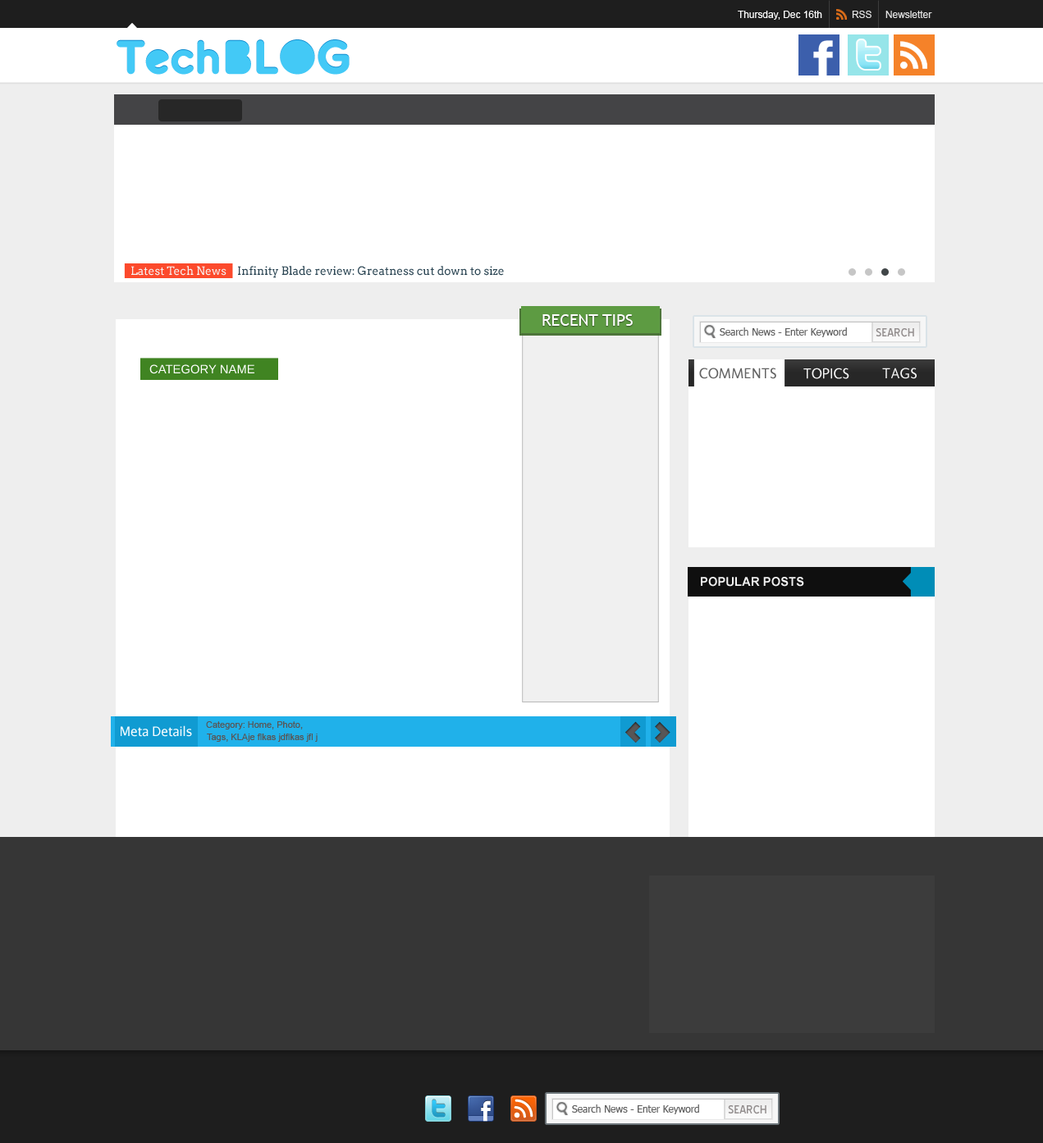
<style>
.page{position:relative;width:1043px;height:1143px;background:#ffffff}
.page>*{position:absolute;margin:0}
.t1{font:9.8px "ArialMT";color:#ffffff}
.t2{font:9.8px "ArialMT";color:#e4e4e4}
.t3{font:50.9px "Zitti";color:#43c9f6}
.t4{font:11.5px "Arvo";color:#ffffff}
.t5{font:11.5px "Arvo";color:#2c4654}
.t6{font:16.4px "TrebuchetMS";color:#ffffff}
.t7{font:9.8px "Tahoma";color:#606060}
.t8{font:14.8px "BlueHighway";color:#938e8e}
.t9{font:12.3px "Arimo";color:#ffffff}
.t10{font:14.8px "Molengo";color:#636363}
.t11{font:14.8px "Molengo";color:#f6f6f6}
.t12{font:12.3px "Arial-BoldMT";color:#f2f2f2}
.t13{font:13.1px "AurulentSans-Regular";color:#f6fcff}
.t14{font:9px "ArialMT";color:#585656}
.t15{font:34.5px "BNMachine";color:#585656}
</style>
<div class="page">
<p class="t1" style="left:738px;top:11px;width:84px;height:9px">Thursday, Dec 16th</p>
<p class="t2" style="left:852px;top:11px;width:20px;height:7px">RSS</p>
<p class="t2" style="left:886px;top:11px;width:46px;height:7px">Newsletter</p>
<p class="t3" style="left:117px;top:39px;width:233px;height:36px">TechBLOG</p>
<p class="t4" style="left:131px;top:266px;width:96px;height:10px">Latest Tech News</p>
<p class="t5" style="left:238px;top:266px;width:266px;height:12px">Infinity Blade review: Greatness cut down to size</p>
<p class="t6" style="left:542px;top:314px;width:91px;height:12px">RECENT TIPS</p>
<p class="t7" style="left:720px;top:327px;width:127px;height:10px">Search News - Enter Keyword</p>
<p class="t8" style="left:876px;top:328px;width:38px;height:9px">SEARCH</p>
<p class="t9" style="left:149px;top:364px;width:105px;height:10px">CATEGORY NAME</p>
<p class="t10" style="left:699px;top:368px;width:77px;height:11px">COMMENTS</p>
<p class="t11" style="left:803px;top:368px;width:46px;height:11px">TOPICS</p>
<p class="t11" style="left:882px;top:368px;width:35px;height:11px">TAGS</p>
<p class="t12" style="left:701px;top:577px;width:103px;height:10px">POPULAR POSTS</p>
<p class="t13" style="left:121px;top:725px;width:71px;height:12px">Meta Details</p>
<p class="t14" style="left:206px;top:721px;width:97px;height:9px">Category: Home, Photo,</p>
<p class="t15" style="left:625px;top:721px;width:45px;height:22px">&lt; &gt;</p>
<p class="t14" style="left:207px;top:734px;width:111px;height:8px">Tags, KLAje flkas jdflkas jfl j</p>
<p class="t7" style="left:572px;top:1105px;width:127px;height:9px">Search News - Enter Keyword</p>
<p class="t8" style="left:728px;top:1105px;width:39px;height:9px">SEARCH</p>
</div>
